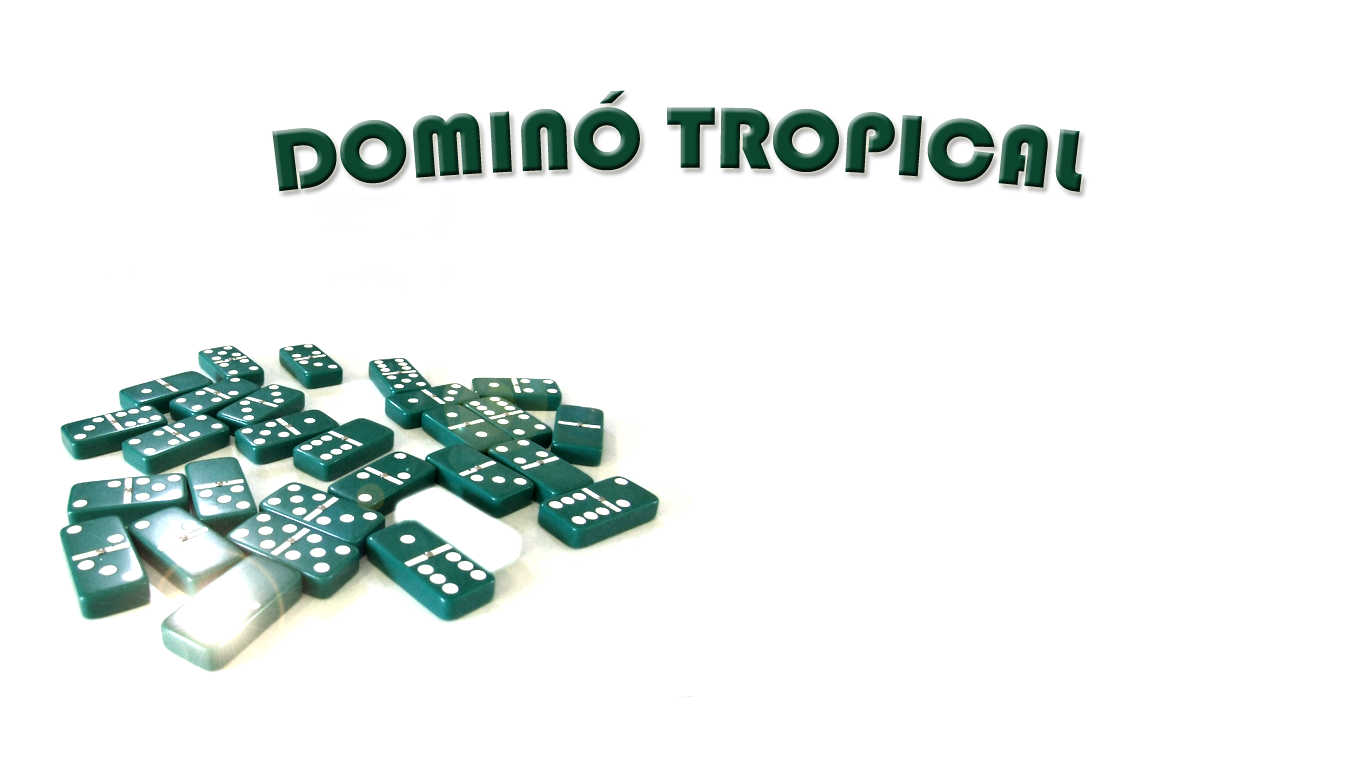
<style>
.page{position:relative;width:1366px;height:768px;background:#ffffff}
.page>*{position:absolute;margin:0}
.t1{font:90px "Bauhaus93";color:#0c462f}
</style>
<div class="page">
<p class="t1" style="left:272px;top:90px;width:810px;height:102px">DOMINÓ TROPICAL</p>
</div>
